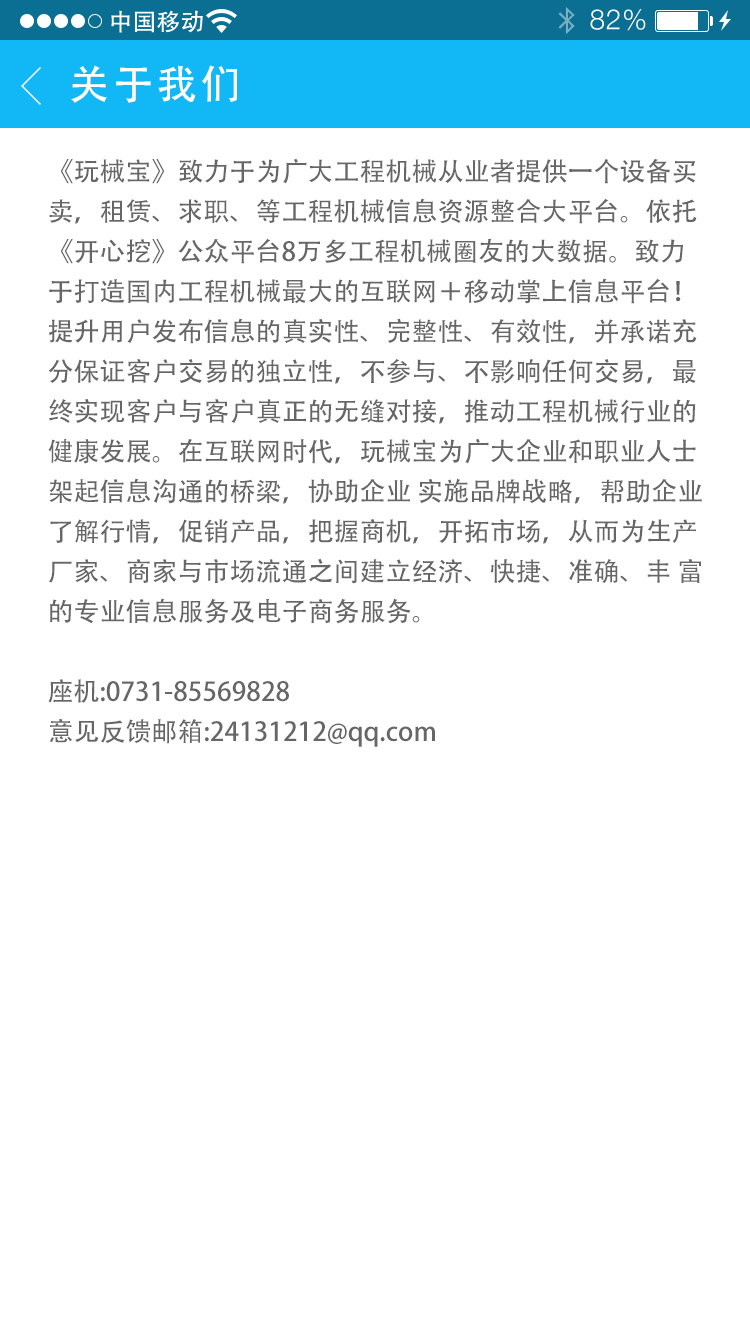
<style>
.page{position:relative;width:750px;height:1334px;background:#ffffff}
.page>*{position:absolute;margin:0}
.t1{font:40px "AdobeHeitiStd-Regular";letter-spacing:0.104em;color:#ffffff}
.t2{font:26px/40px "AdobeHeitiStd-Regular";color:#666666}
</style>
<div class="page">
<p class="t1" style="left:71px;top:65px;width:167px;height:38px">关于我们</p>
<p class="t2" style="left:48px;top:158px;width:654px;height:589px">《玩械宝》致力于为广大工程机械从业者提供一个设备买<br>卖，租赁、求职、等工程机械信息资源整合大平台。依托<br>《开心挖》公众平台8万多工程机械圈友的大数据。致力<br>于打造国内工程机械最大的互联网＋移动掌上信息平台！<br>提升用户发布信息的真实性、完整性、有效性，并承诺充<br>分保证客户交易的独立性，不参与、不影响任何交易，最<br>终实现客户与客户真正的无缝对接，推动工程机械行业的<br>健康发展。在互联网时代，玩械宝为广大企业和职业人士<br>架起信息沟通的桥梁，协助企业 实施品牌战略，帮助企业<br>了解行情，促销产品，把握商机，开拓市场，从而为生产<br>厂家、商家与市场流通之间建立经济、快捷、准确、丰 富<br>的专业信息服务及电子商务服务。<br><br>座机:0731-85569828<br>意见反馈邮箱:24131212@qq.com</p>
</div>
